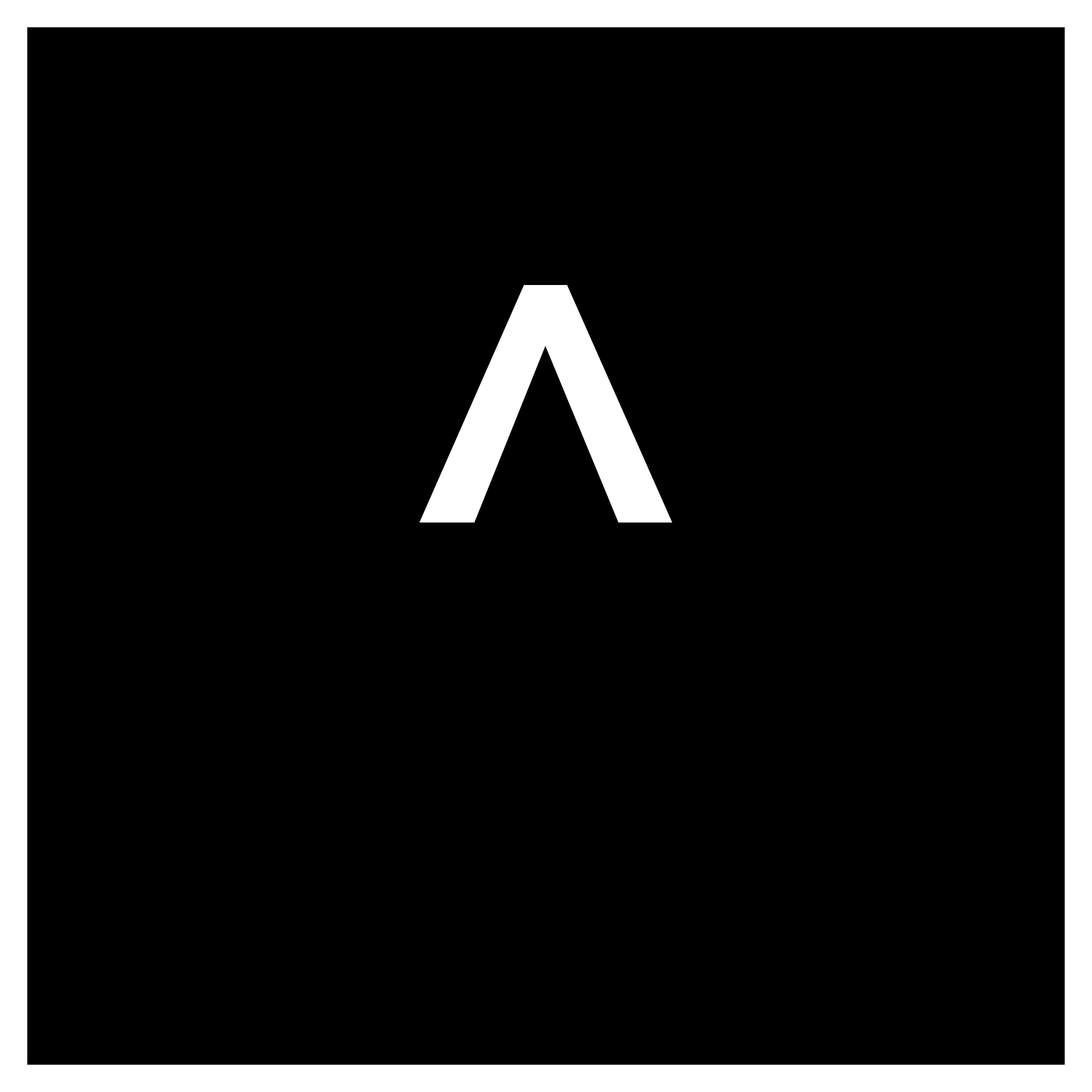
<style>
.page{position:relative;width:1092px;height:1092px;background:#000000}
.page>*{position:absolute;margin:0}
.t1{font:606.7px "ArialMT";color:#ffffff}
</style>
<div class="page">
<p class="t1" style="left:419px;top:285px;width:254px;height:238px">^</p>
</div>
